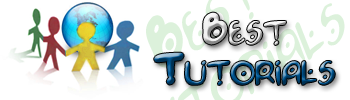
<style>
.page{position:relative;width:350px;height:100px;background:#ffffff}
.page>*{position:absolute;margin:0}
.t1{font:25px "Space-Pontiff-Regular"}
.t2{font:33.3px "Space-Pontiff-Regular"}
</style>
<div class="page">
<p class="t1" style="left:154px;top:12px;width:181px;height:73px;text-align:center"><span class="t2">B</span>est<br><span class="t2">T</span>utorials</p>
</div>
